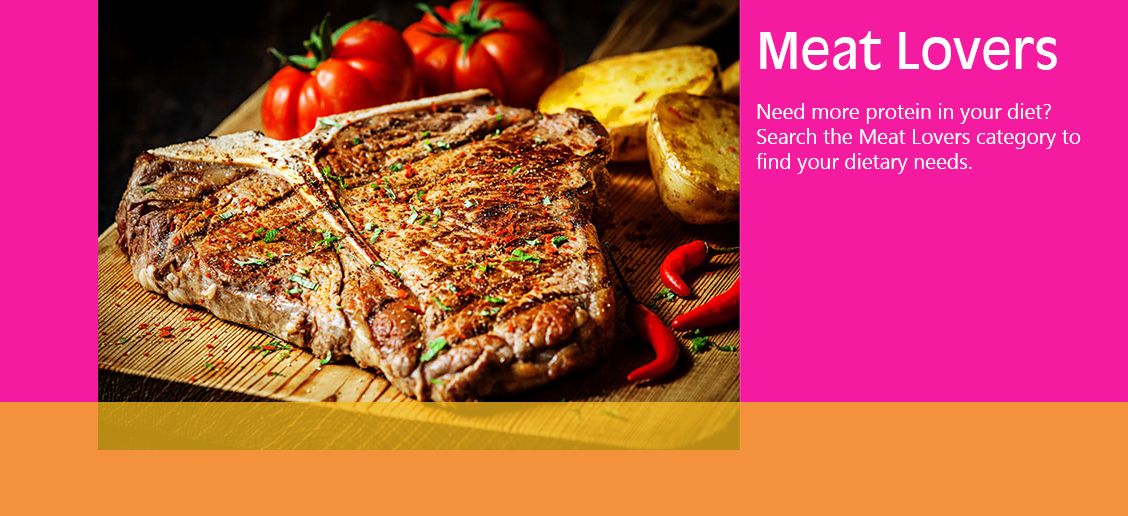
<style>
.page{position:relative;width:1128px;height:516px;background:#f41ba0}
.page>*{position:absolute;margin:0}
.t1{font:20.8px "MicrosoftTaiLe";color:#ffffff}
.t2{font:50px "AntiqueOlive-Roman";color:#ffffff}
</style>
<div class="page">
<p class="t1" style="left:756px;top:31px;width:325px;height:143px"><span class="t2">Meat Lovers<br></span><br>Need more protein in your diet? Search the Meat Lovers category to find your dietary needs.</p>
</div>
